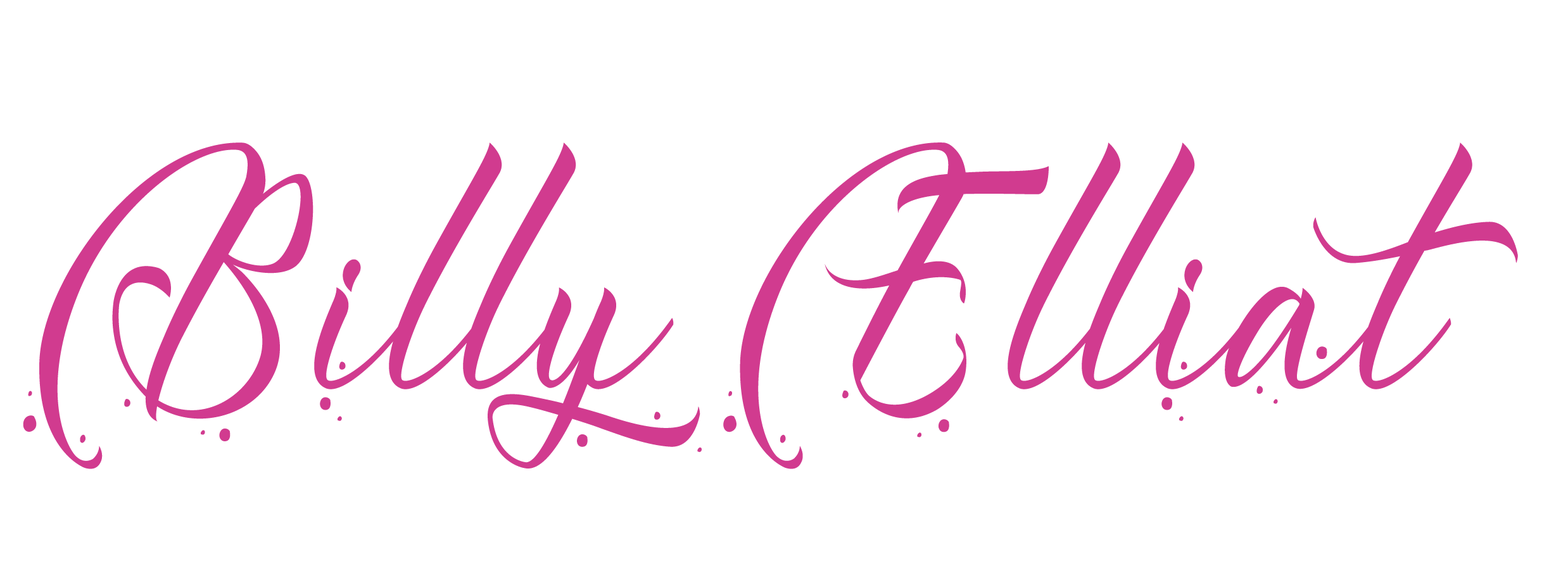
<style>
.page{position:relative;width:1568px;height:566px;background:#ffffff}
.page>*{position:absolute;margin:0}
.t1{font:261.4px "Harytian-PersonalUse";color:#d13b8f;scale:0.78 1}
</style>
<div class="page">
<p class="t1" style="left:23px;top:142px;width:1495px;height:327px">Billy Elliat</p>
</div>
